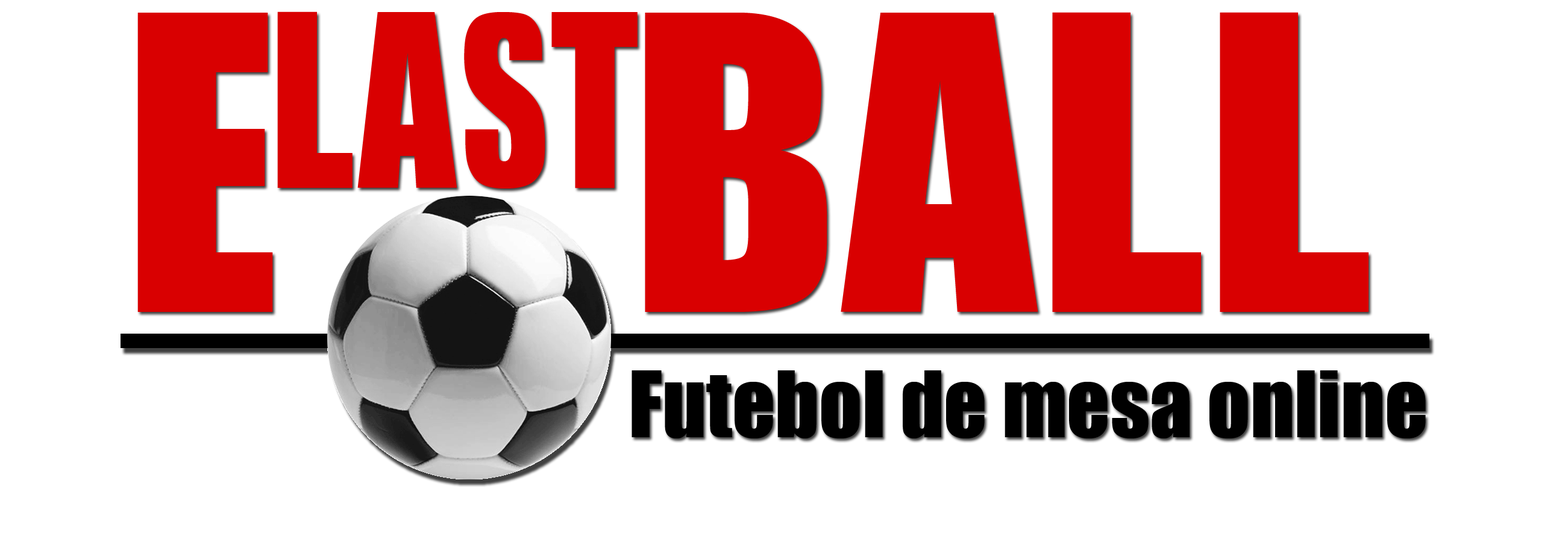
<style>
.page{position:relative;width:1568px;height:542px;background:#ffffff}
.page>*{position:absolute;margin:0}
.t1{font:445.9px "JCHEadA";color:#d90001}
.t2{font:262.3px "JCHEadA";color:#d90001;scale:0.85 1}
.t3{font:84.4px "Impact";color:#000000}
</style>
<div class="page">
<p class="t1" style="left:137px;top:13px;width:136px;height:299px">E</p>
<p class="t2" style="left:277px;top:11px;width:361px;height:178px">LAST</p>
<p class="t1" style="left:645px;top:12px;width:724px;height:300px">BALL</p>
<p class="t3" style="left:632px;top:371px;width:794px;height:68px">Futebol de mesa online</p>
</div>
